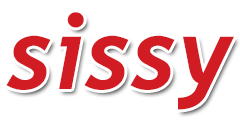
<style>
.page{position:relative;width:240px;height:120px;background:#ffffff}
.page>*{position:absolute;margin:0}
.t1{font:100px "Trebuchet-BoldItalic";color:#d11c24}
</style>
<div class="page">
<p class="t1" style="left:6px;top:12px;width:228px;height:98px">sissy</p>
</div>
